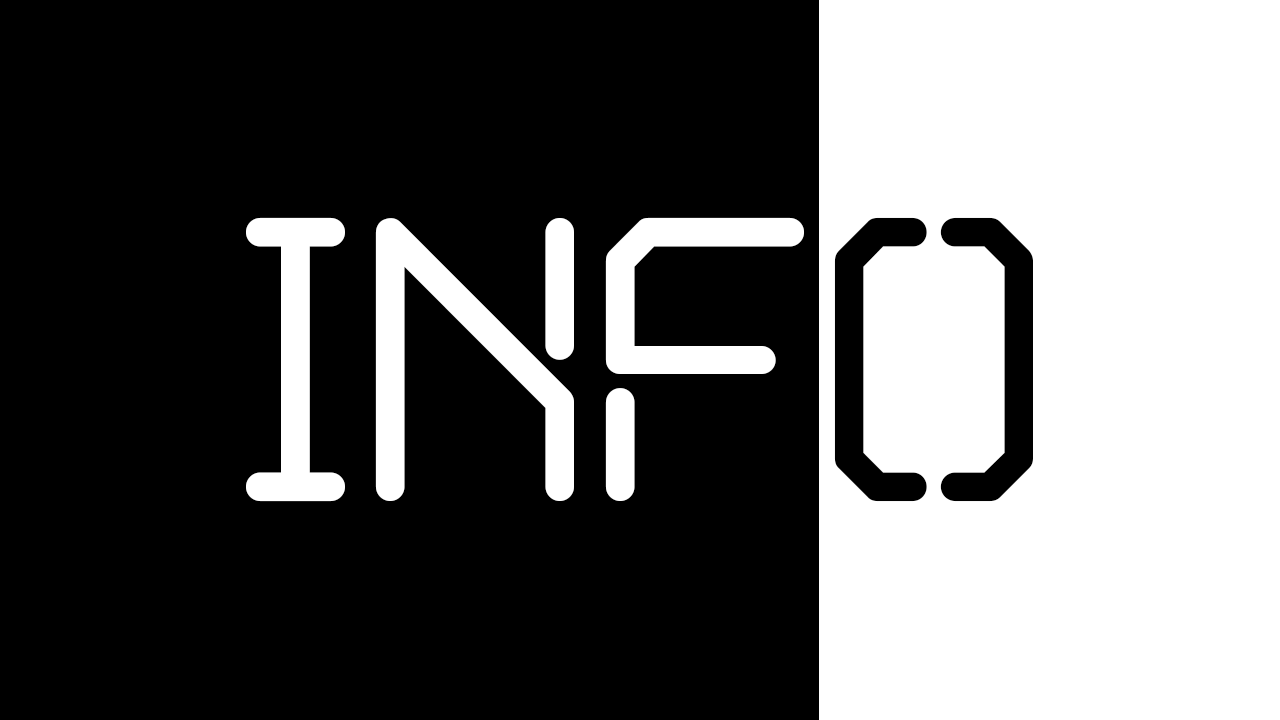
<style>
.page{position:relative;width:1280px;height:720px;background:#000000}
.page>*{position:absolute;margin:0}
.t1{font:458.3px "Marske";color:#ffffff}
.t2{font:458.3px "Marske";color:#000000}
</style>
<div class="page">
<p class="t1" style="left:246px;top:217px;width:787px;height:285px">Inf<span class="t2">o</span></p>
</div>
